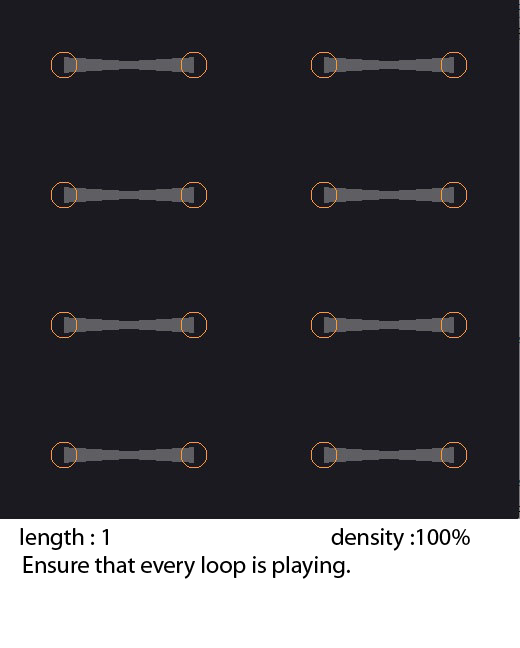
<style>
.page{position:relative;width:520px;height:648px;background:#1b1a20}
.page>*{position:absolute;margin:0}
.t1{font:24px "MyriadPro-Regular";color:#000000}
</style>
<div class="page">
<p class="t1" style="left:20px;top:528px;width:450px;height:23px">length : 1                                           density :100%</p>
<p class="t1" style="left:23px;top:556px;width:327px;height:23px">Ensure that every loop is playing.</p>
</div>
